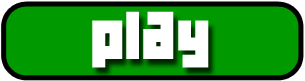
<style>
.page{position:relative;width:305px;height:81px;background:#009900}
.page>*{position:absolute;margin:0}
.t1{font:60px "04b19";color:#ffffff}
</style>
<div class="page">
<p class="t1" style="left:92px;top:11px;width:117px;height:57px">play</p>
</div>
